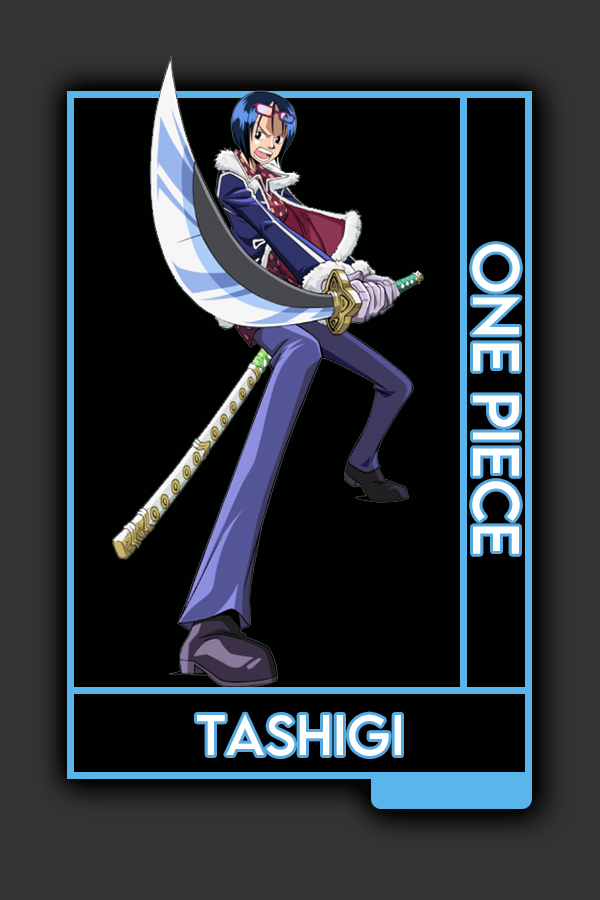
<style>
.page{position:relative;width:600px;height:900px;background:#000200}
.page>*{position:absolute;margin:0}
.t1{font:58.4px "LEMONMILK-Regular";color:#ffffff}
.t2{font:50.5px "LEMONMILK-Regular";color:#ffffff}
</style>
<div class="page">
<p class="t1" style="left:472px;top:244px;width:48px;height:310px;rotate:90deg">One Piece</p>
<p class="t2" style="left:197px;top:714px;width:204px;height:42px">Tashigi</p>
</div>
